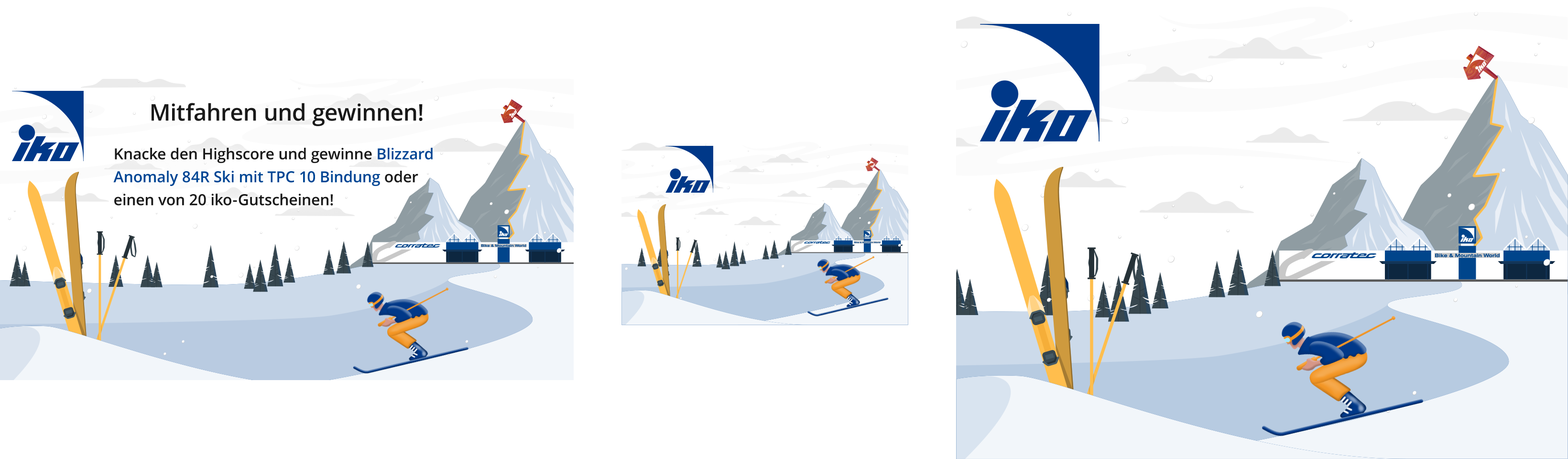
<style>
.page{position:relative;width:1568px;height:459px;background:#ffffff}
.page>*{position:absolute;margin:0}
.t1{font:22.9px "OpenSans-SemiBold";color:#191919}
.t2{font:15.3px/22.9px "OpenSans-SemiBold";color:#014694}
.t3{font:15.3px/22.9px "OpenSans-SemiBold";color:#191919}
</style>
<div class="page">
<p class="t1" style="left:152px;top:103px;width:271px;height:23px">Mitfahren und gewinnen!</p>
<p class="t2" style="left:113px;top:148px;width:320px;height:58px"><span class="t3">Knacke den Highscore und gewinne </span>Blizzard Anomaly 84R Ski mit TPC 10 Bindung <span class="t3">oder einen von 20 iko-Gutscheinen!</span></p>
</div>
